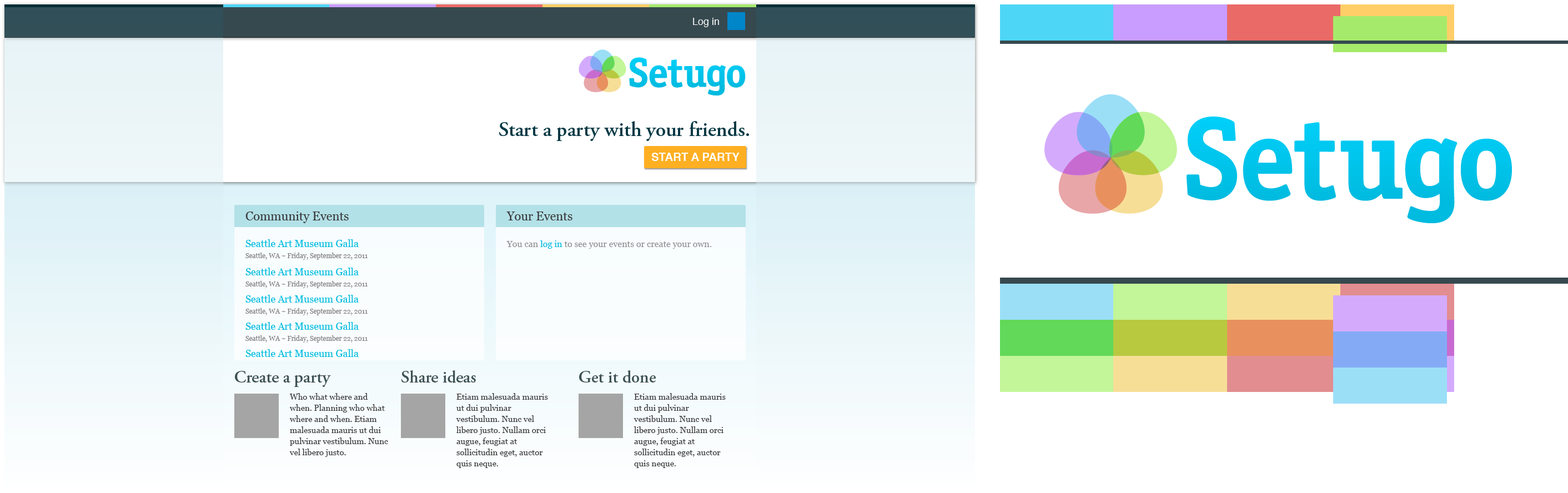
<style>
.page{position:relative;width:1568px;height:493px;background:#ffffff}
.page>*{position:absolute;margin:0}
.t1{font:10px "Helvetica";color:#ffffff}
.t2{font:20.7px "AGaramondPro-Semibold";color:#043844}
.t3{font:11.3px "Helvetica-Bold";color:#ffffff}
.t4{font:12.2px "Georgia";color:#3a3a3a}
.t5{font:10px "Georgia";color:#00bbe0}
.t6{font:8.9px "Georgia";color:#8e8e8e}
.t7{font:8.9px "Georgia";color:#00bbe0}
.t8{font:6.7px "Georgia";color:#848484}
.t9{font:17.2px "AGaramondPro-Semibold";color:#3e5154}
.t10{font:8.3px/11.1px "Georgia";color:#3a3a3a}
</style>
<div class="page">
<p class="t1" style="left:693px;top:18px;width:26px;height:9px">Log in</p>
<p class="t2" style="left:499px;top:121px;width:250px;height:20px">Start a party with your friends.</p>
<p class="t3" style="left:651px;top:153px;width:89px;height:8px">START A PARTY</p>
<p class="t4" style="left:245px;top:212px;width:104px;height:11px">Community Events</p>
<p class="t4" style="left:506px;top:212px;width:66px;height:8px">Your Events</p>
<p class="t5" style="left:245px;top:239px;width:114px;height:8px">Seattle Art Museum Galla</p>
<p class="t6" style="left:506px;top:240px;width:205px;height:9px">You can<span class="t7"> log in </span>to see your events or create your own.</p>
<p class="t8" style="left:245px;top:253px;width:123px;height:7px">Seattle, WA ~ Friday, September 22, 2011</p>
<p class="t5" style="left:245px;top:268px;width:114px;height:7px">Seattle Art Museum Galla</p>
<p class="t8" style="left:245px;top:281px;width:123px;height:7px">Seattle, WA ~ Friday, September 22, 2011</p>
<p class="t5" style="left:245px;top:295px;width:114px;height:8px">Seattle Art Museum Galla</p>
<p class="t8" style="left:245px;top:308px;width:123px;height:7px">Seattle, WA ~ Friday, September 22, 2011</p>
<p class="t5" style="left:245px;top:322px;width:114px;height:8px">Seattle Art Museum Galla</p>
<p class="t8" style="left:245px;top:335px;width:123px;height:8px">Seattle, WA ~ Friday, September 22, 2011</p>
<p class="t5" style="left:245px;top:349px;width:114px;height:8px">Seattle Art Museum Galla</p>
<p class="t9" style="left:235px;top:371px;width:96px;height:16px">Create a party</p>
<p class="t9" style="left:401px;top:370px;width:75px;height:13px">Share ideas</p>
<p class="t9" style="left:579px;top:370px;width:77px;height:13px">Get it done</p>
<p class="t10" style="left:289px;top:393px;width:99px;height:64px">Who what where and when. Planning who what where and when. Etiam malesuada mauris ut dui pulvinar vestibulum. Nunc vel libero justo.</p>
<p class="t10" style="left:456px;top:393px;width:92px;height:75px">Etiam malesuada mauris ut dui pulvinar vestibulum. Nunc vel libero justo. Nullam orci augue, feugiat at sollicitudin eget, auctor quis neque.</p>
<p class="t10" style="left:634px;top:393px;width:92px;height:75px">Etiam malesuada mauris ut dui pulvinar vestibulum. Nunc vel libero justo. Nullam orci augue, feugiat at sollicitudin eget, auctor quis neque.</p>
</div>
